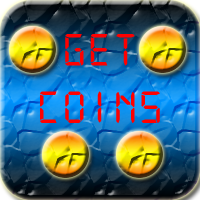
<style>
.page{position:relative;width:200px;height:200px}
.page>*{position:absolute;margin:0}
.t1{font:48px "Digital-7Mono";letter-spacing:0.075em;color:#ff0000}
</style>
<div class="page">
<p class="t1" style="left:40px;top:34px;width:120px;height:89px;text-align:center">get<br>coins</p>
</div>
